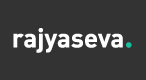
<style>
.page{position:relative;width:146px;height:80px;background:#333333}
.page>*{position:absolute;margin:0}
.t1{font:26px "DIN-BoldAlternate";color:#ffffff}
.t2{font:30px "DIN-BoldAlternate";color:#1abc9c}
</style>
<div class="page">
<p class="t1" style="left:13px;top:28px;width:119px;height:25px">rajyaseva<span class="t2">.</span></p>
</div>
